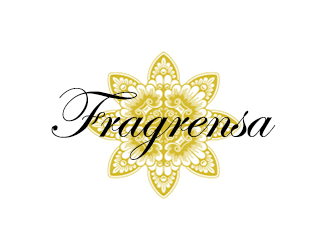
<style>
.page{position:relative;width:328px;height:234px;background:#ffffff}
.page>*{position:absolute;margin:0}
.t1{font:72px "EdwardianScriptITC";color:#000000}
</style>
<div class="page">
<p class="t1" style="left:51px;top:88px;width:225px;height:72px">Fragrensa</p>
</div>
